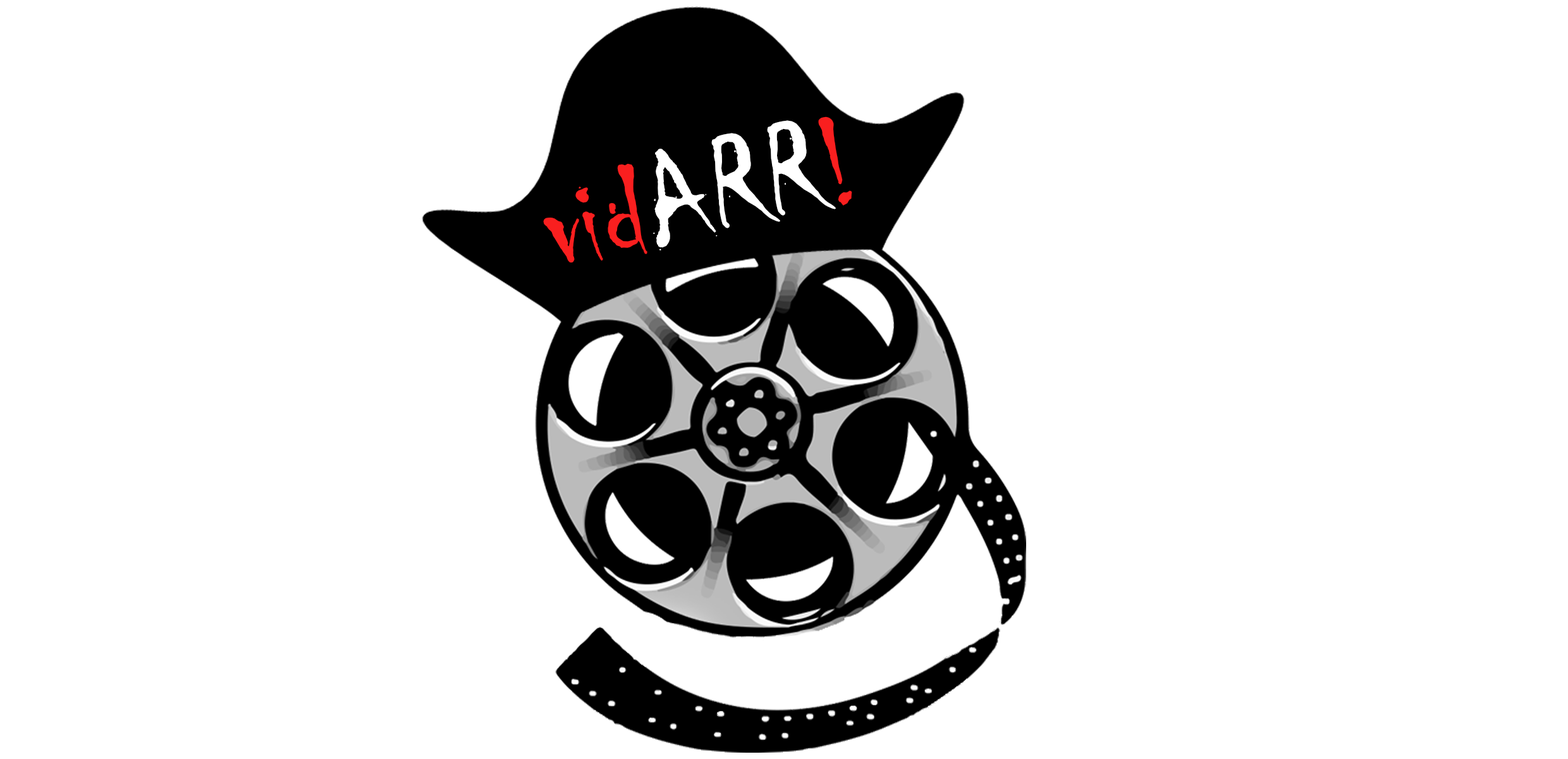
<style>
.page{position:relative;width:1568px;height:759px;background:#ffffff}
.page>*{position:absolute;margin:0}
.t1{font:132.3px "Chiller-Regular";color:#f91f1f}
.t2{font:132.3px "Chiller-Regular";color:#ffffff}
</style>
<div class="page">
<p class="t1" style="left:543px;top:116px;width:309px;height:147px;rotate:-13deg">vid<span class="t2">ARR</span>!</p>
</div>
